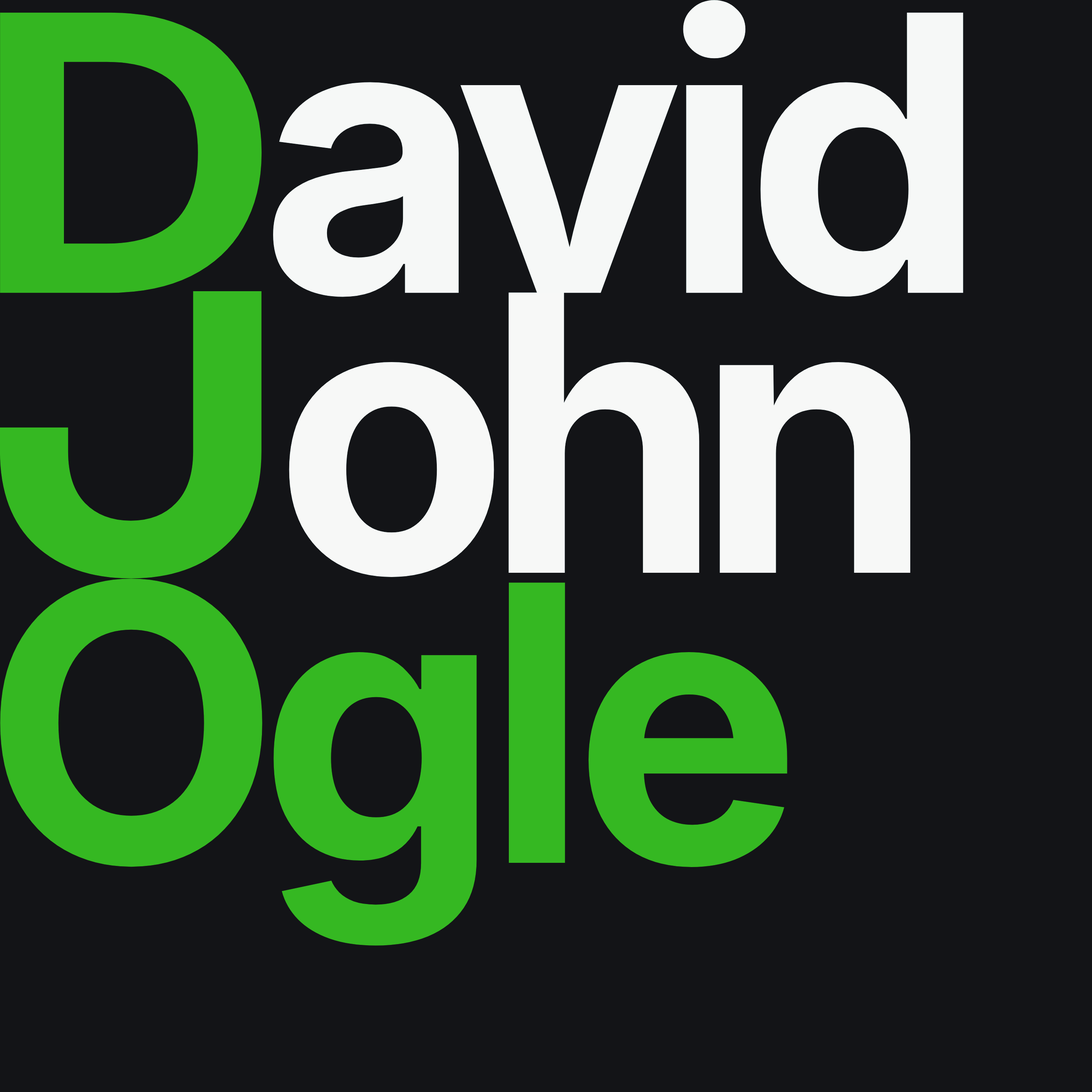
<style>
.page{position:relative;width:1092px;height:1092px;background:#131417}
.page>*{position:absolute;margin:0}
.t1{font:385.2px "Inter-Regular_18.000opsz_700.000wght";letter-spacing:-0.05em;color:#f2f4f3}
.t2{font:385.2px "Inter-Regular_18.000opsz_700.000wght";letter-spacing:-0.05em;color:#3c8c52;scale:1.11 1}
.t3{font:385.2px "Inter-Regular_18.000opsz_700.000wght";letter-spacing:-0.036em;color:#35b822}
.t4{font:385.2px "Inter-Regular_18.000opsz_700.000wght";letter-spacing:-0.05em;color:#35b822}
</style>
<div class="page">
<p class="t1" style="left:0px;top:0px;width:963px;height:297px"><span class="t2">D</span>avid</p>
<p class="t3" style="left:0px;top:579px;width:787px;height:367px"><span class="t4">O</span>gle</p>
</div>
